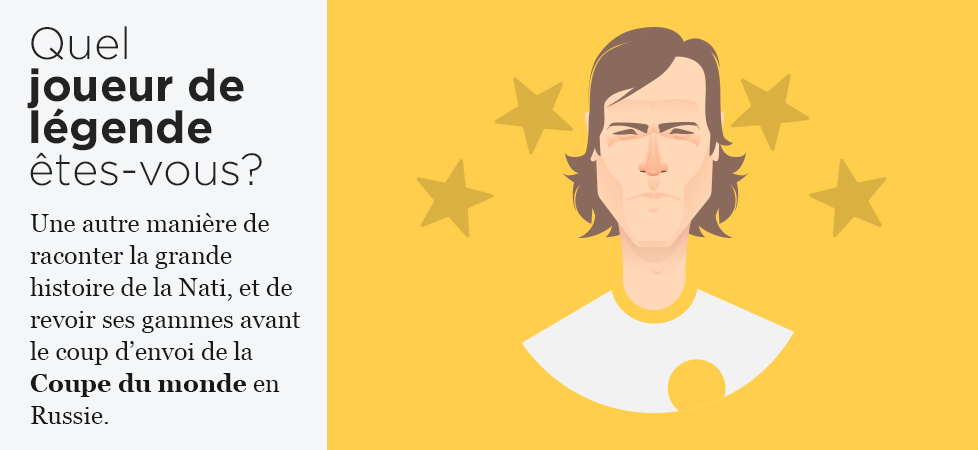
<style>
.page{position:relative;width:978px;height:450px;background:#ffce4d}
.page>*{position:absolute;margin:0}
.t1{font:45px/42px "Gotham-Bold";color:#232222}
.t2{font:45px/42px "Gotham-Light";color:#232222}
.t3{font:25px/32px "Georgia";color:#181818}
.t4{font:25px/32px "Georgia-Bold";color:#181818}
</style>
<div class="page">
<p class="t1" style="left:27px;top:26px;width:235px;height:160px"><span class="t2">Quel </span>joueur de légende<span class="t2"> êtes-vous?</span></p>
<p class="t3" style="left:30px;top:213px;width:271px;height:211px">Une autre manière de raconter la grande histoire de la Nati, et de revoir ses gammes avant le coup d’envoi de la <span class="t4">Coupe du monde</span> en Russie.</p>
</div>
